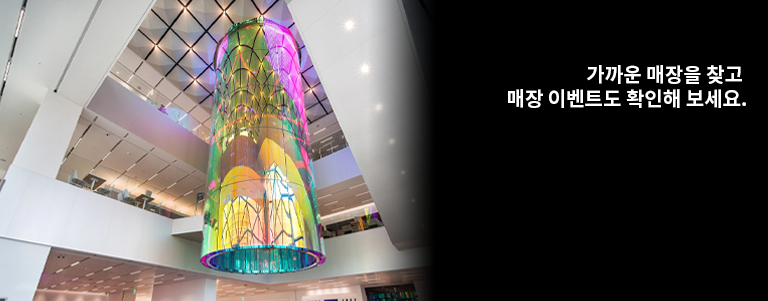
<style>
.page{position:relative;width:768px;height:301px;background:#000000}
.page>*{position:absolute;margin:0}
.t1{font:20px "NotoSansKR-Bold";color:#ffffff}
</style>
<div class="page">
<p class="t1" style="left:508px;top:65px;width:238px;height:43px;text-align:right">가까운 매장을 찾고 <br>매장 이벤트도 확인해 보세요.</p>
</div>
